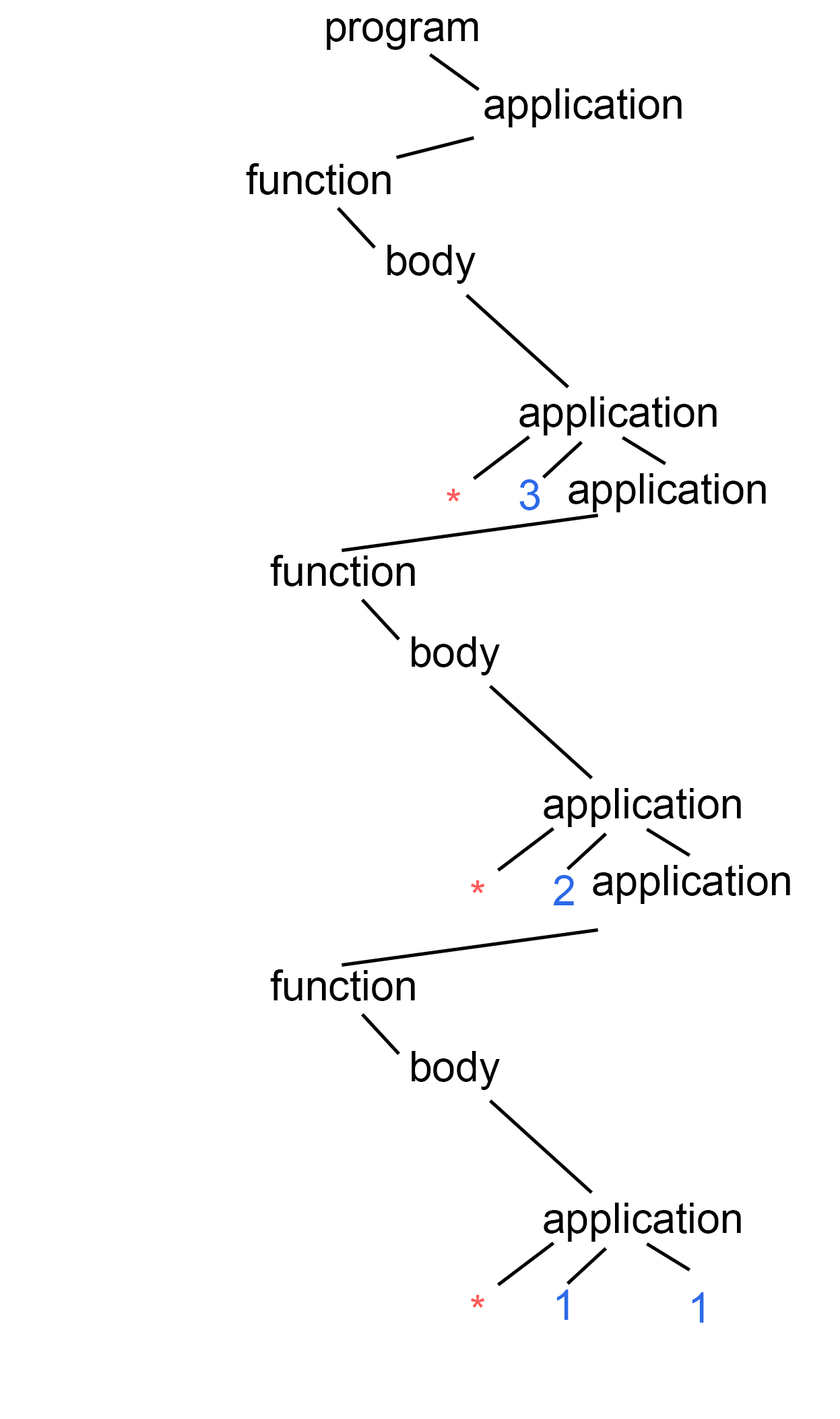
<style>
.page{position:relative;width:840px;height:1419px;background:#ffffff}
.page>*{position:absolute;margin:0}
.t1{font:42.1px "ArialMT";color:#000000}
.t2{font:42.1px "ArialMT";color:#2b6ae9}
.t3{font:42.1px "ArialMT";color:#ff5a5a}
</style>
<div class="page">
<p class="t1" style="left:327px;top:18px;width:152px;height:32px">program</p>
<p class="t1" style="left:485px;top:88px;width:197px;height:39px">application</p>
<p class="t1" style="left:246px;top:163px;width:145px;height:32px">function</p>
<p class="t1" style="left:388px;top:245px;width:88px;height:39px">body</p>
<p class="t1" style="left:520px;top:396px;width:197px;height:39px">application</p>
<p class="t1" style="left:569px;top:473px;width:197px;height:39px">application</p>
<p class="t2" style="left:520px;top:479px;width:21px;height:31px">3</p>
<p class="t3" style="left:447px;top:489px;width:14px;height:12px">*</p>
<p class="t1" style="left:270px;top:555px;width:145px;height:31px">function</p>
<p class="t1" style="left:412px;top:636px;width:88px;height:39px">body</p>
<p class="t1" style="left:544px;top:788px;width:197px;height:39px">application</p>
<p class="t1" style="left:593px;top:865px;width:198px;height:39px">application</p>
<p class="t3" style="left:471px;top:880px;width:14px;height:13px">*</p>
<p class="t2" style="left:553px;top:875px;width:21px;height:30px">2</p>
<p class="t1" style="left:270px;top:969px;width:145px;height:32px">function</p>
<p class="t1" style="left:412px;top:1051px;width:88px;height:39px">body</p>
<p class="t1" style="left:544px;top:1202px;width:197px;height:40px">application</p>
<p class="t2" style="left:557px;top:1289px;width:12px;height:31px">1</p>
<p class="t3" style="left:471px;top:1295px;width:14px;height:13px">*</p>
<p class="t2" style="left:692px;top:1292px;width:12px;height:30px">1</p>
</div>
